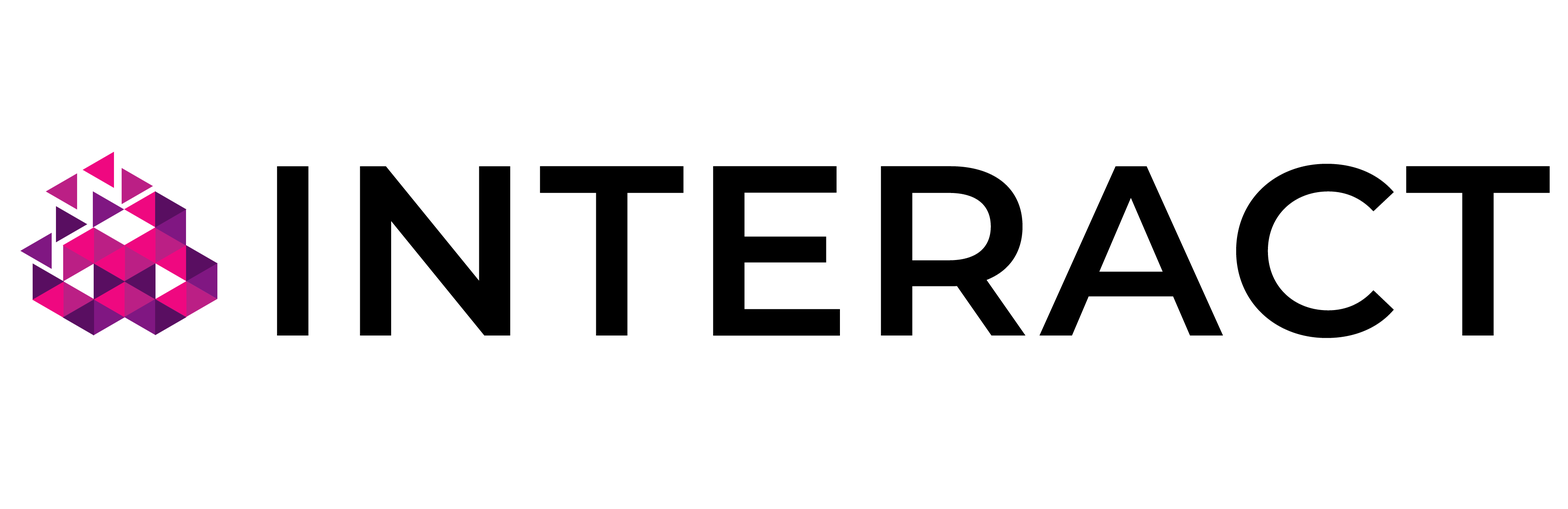
<style>
.page{position:relative;width:1568px;height:509px;background:#ffffff}
.page>*{position:absolute;margin:0}
.t1{font:241.6px "Montserrat-SemiBold";letter-spacing:0.025em;color:#000000}
</style>
<div class="page">
<p class="t1" style="left:277px;top:164px;width:1273px;height:174px">INTERACT</p>
</div>
